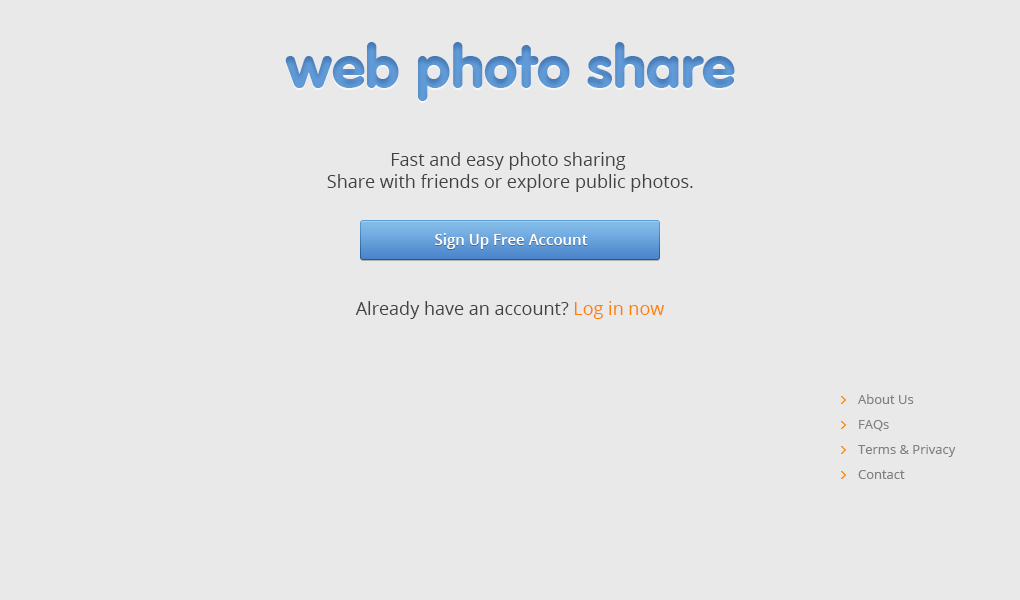
<style>
.page{position:relative;width:1020px;height:600px;background:#e9e9e9}
.page>*{position:absolute;margin:0}
.t1{font:60px "VAGRounded-Black";color:#619bd7}
.t2{font:18px "OpenSans";color:#424242}
.t3{font:15px "OpenSans-Semibold";color:#ffffff}
.t4{font:18px "OpenSans";color:#ff8100}
.t5{font:13px/25px "OpenSans";color:#808080}
</style>
<div class="page">
<p class="t1" style="left:285px;top:42px;width:450px;height:59px">web photo share</p>
<p class="t2" style="left:327px;top:152px;width:366px;height:40px;text-align:center">Fast and easy photo sharing<br> Share with friends or explore public photos.</p>
<p class="t3" style="left:435px;top:233px;width:153px;height:16px">Sign Up Free Account</p>
<p class="t2" style="left:355px;top:301px;width:309px;height:18px">Already have an account? <span class="t4">Log in now</span></p>
<p class="t5" style="left:858px;top:394px;width:98px;height:85px">About Us<br>FAQs<br>Terms &amp; Privacy<br>Contact</p>
</div>
